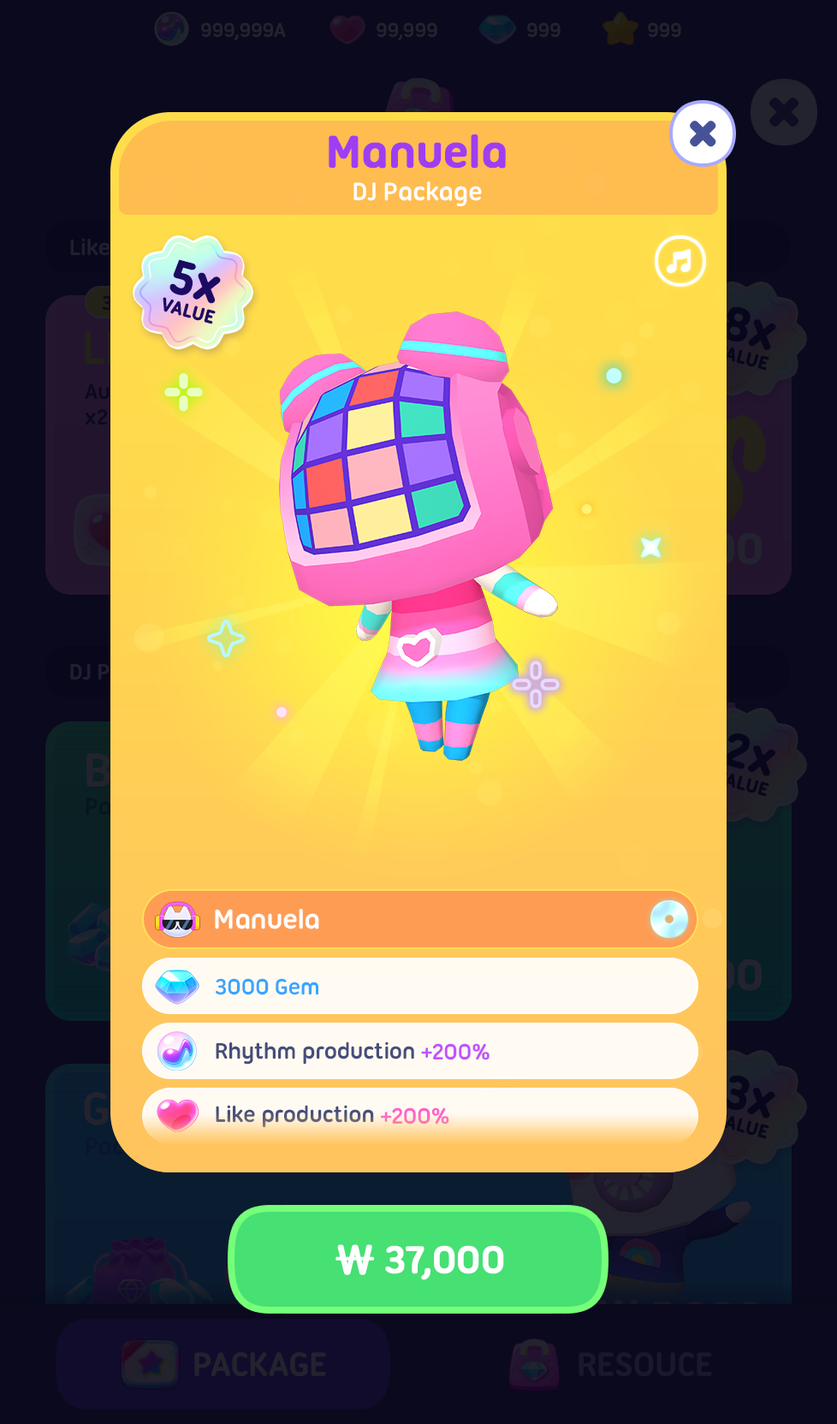
<style>
.page{position:relative;width:837px;height:1424px;background:#0a091e}
.page>*{position:absolute;margin:0}
.t1{font:47.9px "UbuntuTitling-Bold";letter-spacing:-0.025em;color:#9e3ef0;font-weight:bold}
.t2{font:27.4px "UbuntuTitling-Bold";letter-spacing:-0.025em;color:#ffffff}
.t3{font:49.9px "UbuntuTitling-Bold";letter-spacing:-0.025em;color:#1d0a64;font-weight:bold}
.t4{font:19.6px "UbuntuTitling-Bold";letter-spacing:-0.025em;color:#1d0a64;text-transform:uppercase;font-weight:bold}
.t5{font:29.1px "UbuntuTitling-Bold";letter-spacing:-0.025em;color:#ffffff}
.t6{font:24px "UbuntuTitling-Bold";letter-spacing:-0.025em;color:#3ba4ff}
.t7{font:24px "UbuntuTitling-Bold";letter-spacing:-0.025em;color:#454e7b}
.t8{font:24px "UbuntuTitling-Bold";letter-spacing:-0.025em;color:#c053ff}
.t9{font:24px "UbuntuTitling-Bold";letter-spacing:-0.025em;color:#ff60cc}
.t10{font:41.1px "UbuntuTitling-Bold";letter-spacing:-0.04em;color:#ffffff;text-transform:uppercase;font-weight:bold}
.t11{font:41.1px "NanumSquareRoundOTFEB";letter-spacing:-0.04em;color:#ffffff;text-transform:uppercase;font-weight:bold}
</style>
<div class="page">
<p class="t1" style="left:329px;top:134px;width:177px;height:35px">Manuela</p>
<p class="t2" style="left:354px;top:181px;width:128px;height:25px">DJ Package</p>
<p class="t3" style="left:169px;top:259px;width:52px;height:45px;rotate:15deg">5x</p>
<p class="t4" style="left:163px;top:297px;width:53px;height:27px;rotate:15deg">Value</p>
<p class="t5" style="left:215px;top:909px;width:104px;height:21px">Manuela</p>
<p class="t6" style="left:216px;top:978px;width:102px;height:18px">3000 Gem</p>
<p class="t7" style="left:216px;top:1042px;width:274px;height:23px">Rhythm production <span class="t8">+200%</span></p>
<p class="t7" style="left:216px;top:1105px;width:233px;height:23px">Like production <span class="t9">+200%</span></p>
<p class="t10" style="left:336px;top:1245px;width:168px;height:36px"><span class="t11">₩ </span>37,000</p>
</div>
